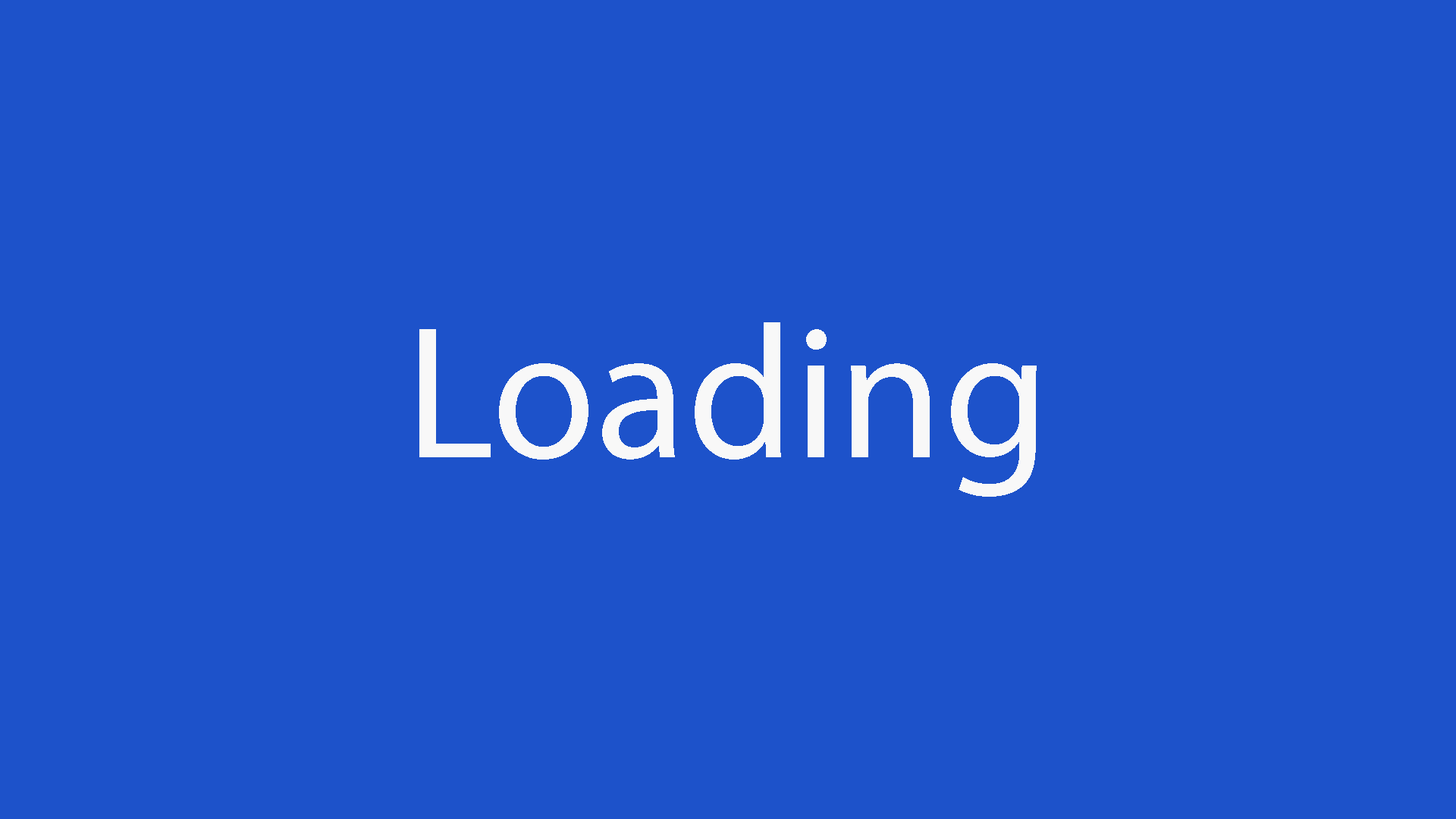
<style>
.page{position:relative;width:1456px;height:819px;background:#1d52ca}
.page>*{position:absolute;margin:0}
.t1{font:189.6px "MyriadPro-Regular";color:#f8f8f8}
</style>
<div class="page">
<p class="t1" style="left:419px;top:322px;width:618px;height:175px">Loading</p>
</div>
